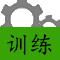
<style>
.page{position:relative;width:60px;height:60px;background:#37a307}
.page>*{position:absolute;margin:0}
.t1{font:24px "¿¬Ìå";color:#000000}
</style>
<div class="page">
<p class="t1" style="left:7px;top:34px;width:45px;height:21px">训练</p>
</div>
